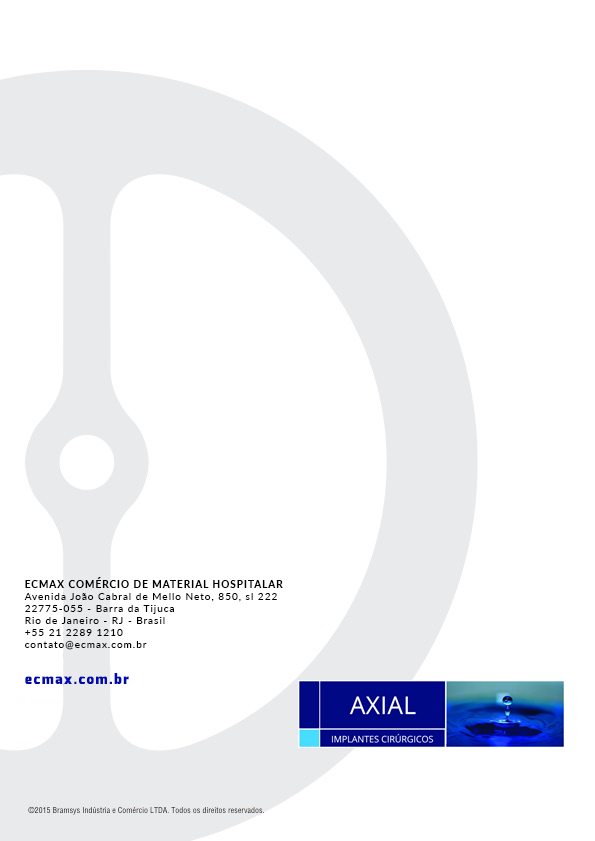
<style>
.page{position:relative;width:595px;height:841px;background:#ffffff}
.page>*{position:absolute;margin:0}
.t1{font:10px/12px "Lato-Regular";letter-spacing:0.1em;color:#000000}
.t2{font:10px/12px "Lato-Bold";letter-spacing:0.1em;color:#000000}
.t3{font:14px "Exo-Black";letter-spacing:0.1em;color:#000baf}
</style>
<div class="page">
<p class="t1" style="left:24px;top:577px;width:259px;height:73px"><span class="t2">ECMAX COMÉRCIO DE MATERIAL HOSPITALAR<br></span>Avenida João Cabral de Mello Neto, 850, sl 222<br>22775-055 - Barra da Tijuca<br>Rio de Janeiro - RJ - Brasil<br>+55 21 2289 1210 <br>contato@ecmax.com.br</p>
<p class="t3" style="left:25px;top:673px;width:104px;height:11px">ecmax.com.br</p>
</div>
